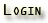
<style>
.page{position:relative;width:48px;height:23px}
.page>*{position:absolute;margin:0}
.t1{font:17px "OCRAExtended";color:#000000;font-variant:small-caps}
</style>
<div class="page">
<p class="t1" style="left:4px;top:4px;width:37px;height:11px">Login</p>
</div>
